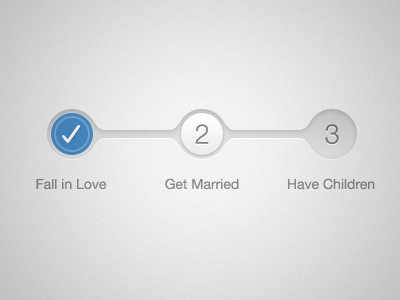
<style>
.page{position:relative;width:400px;height:300px}
.page>*{position:absolute;margin:0}
.t1{font:27.2px "HelveticaNeue-Light";color:#888888}
.t2{font:27.2px "HelveticaNeue-Light";color:#747474}
.t3{font:14px "HelveticaNeue";color:#898989}
</style>
<div class="page">
<p class="t1" style="left:195px;top:124px;width:14px;height:20px">2</p>
<p class="t2" style="left:325px;top:124px;width:14px;height:21px">3</p>
<p class="t3" style="left:36px;top:179px;width:71px;height:11px">Fall in Love</p>
<p class="t3" style="left:165px;top:178px;width:74px;height:12px">Get Married</p>
<p class="t3" style="left:288px;top:178px;width:87px;height:12px">Have Children</p>
</div>
